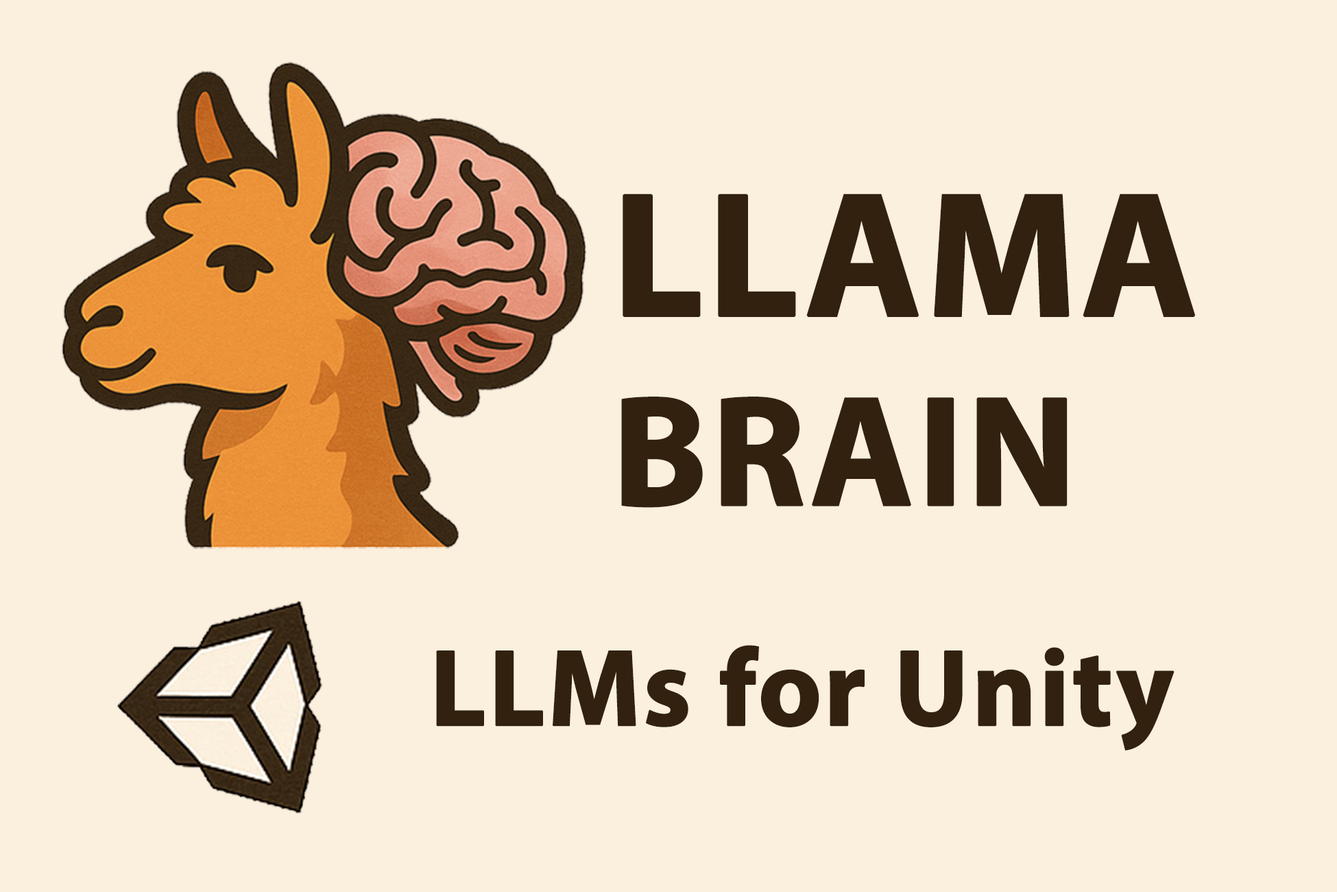
<style>
.page{position:relative;width:1337px;height:892px;background:#fbefdd}
.page>*{position:absolute;margin:0}
.t1{font:178.3px "MyriadPro-Bold";color:#32210f;font-weight:bold}
.t2{font:157.7px "MyriadPro-Bold";color:#32210f;font-weight:bold}
.t3{font:109.7px "MyriadPro-Bold";color:#32210f;font-weight:bold}
</style>
<div class="page">
<p class="t1" style="left:621px;top:193px;width:574px;height:315px">LLAMA<br><span class="t2">BRAIN</span></p>
<p class="t3" style="left:436px;top:645px;width:739px;height:105px">LLMs for Unity</p>
</div>
